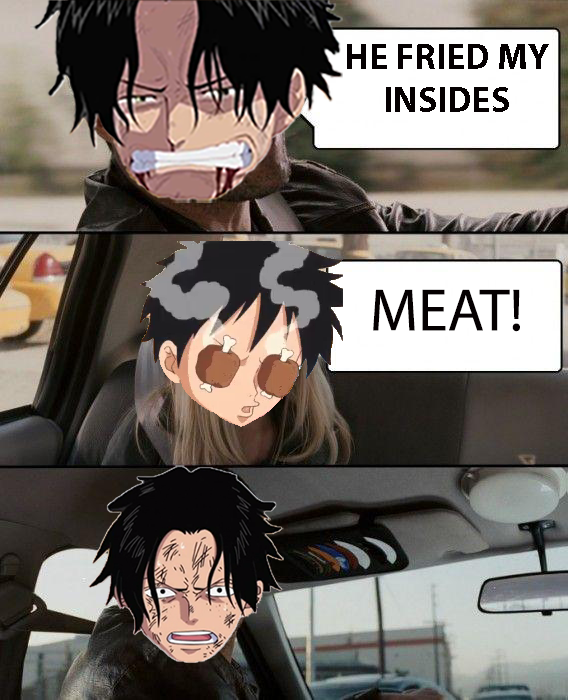
<style>
.page{position:relative;width:568px;height:700px}
.page>*{position:absolute;margin:0}
.t1{font:36px "MyriadPro-Bold";color:#050001}
.t2{font:60px "MyriadPro-Regular";color:#050001}
</style>
<div class="page">
<p class="t1" style="left:347px;top:44px;width:202px;height:68px;text-align:center">HE FRIED MY INSIDES</p>
<p class="t2" style="left:373px;top:289px;width:147px;height:43px">MEAT!</p>
</div>
